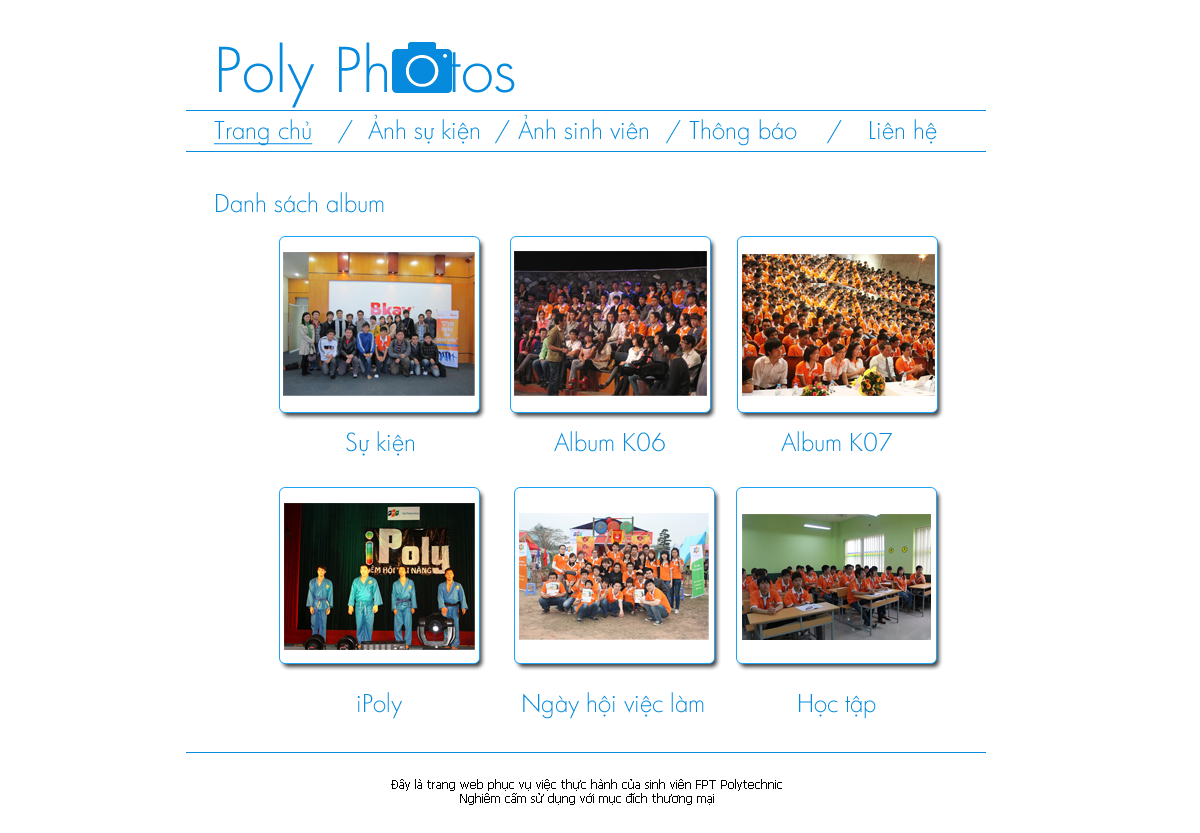
<style>
.page{position:relative;width:1200px;height:833px;background:#ffffff}
.page>*{position:absolute;margin:0}
.t1{font:24px "FuturaLt";color:#058ade;text-decoration:underline}
.t2{font:24px "FuturaLt";color:#058ade}
.t3{font:12px "Tahoma";color:#000000}
</style>
<div class="page">
<p class="t1" style="left:214px;top:119px;width:99px;height:27px">Trang chủ</p>
<p class="t2" style="left:338px;top:119px;width:15px;height:25px">/</p>
<p class="t2" style="left:368px;top:114px;width:111px;height:30px">Ảnh sự kiện</p>
<p class="t2" style="left:495px;top:119px;width:15px;height:25px">/</p>
<p class="t2" style="left:518px;top:114px;width:130px;height:26px">Ảnh sinh viên</p>
<p class="t2" style="left:666px;top:119px;width:15px;height:25px">/</p>
<p class="t2" style="left:689px;top:119px;width:108px;height:27px">Thông báo</p>
<p class="t2" style="left:827px;top:119px;width:15px;height:25px">/</p>
<p class="t2" style="left:870px;top:119px;width:67px;height:25px">Liên hệ</p>
<p class="t2" style="left:216px;top:192px;width:168px;height:21px">Danh sách album</p>
<p class="t2" style="left:346px;top:431px;width:68px;height:25px">Sự kiện</p>
<p class="t2" style="left:554px;top:431px;width:111px;height:21px">Album K06</p>
<p class="t2" style="left:781px;top:431px;width:112px;height:21px">Album K07</p>
<p class="t2" style="left:357px;top:692px;width:45px;height:27px">iPoly</p>
<p class="t2" style="left:523px;top:692px;width:181px;height:27px">Ngày hội việc làm</p>
<p class="t2" style="left:799px;top:694px;width:77px;height:25px">Học tập</p>
<p class="t3" style="left:391px;top:779px;width:391px;height:26px;text-align:center">Đây là trang web phục vụ việc thực hành của sinh viên FPT Polytechnic<br>Nghiêm cấm sử dụng với mục đích thương mại</p>
</div>
